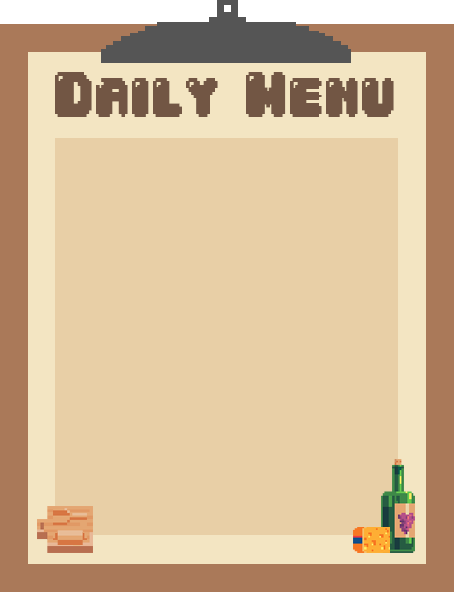
<style>
.page{position:relative;width:454px;height:592px;background:#e8cfa6}
.page>*{position:absolute;margin:0}
.t1{font:53.4px "04b30";letter-spacing:-0.01em;color:#725644;font-weight:bold;scale:0.8 1}
</style>
<div class="page">
<p class="t1" style="left:55px;top:72px;width:339px;height:45px">Daily Menu</p>
</div>
